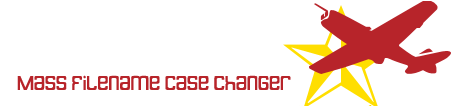
<style>
.page{position:relative;width:453px;height:106px;background:#ffffff}
.page>*{position:absolute;margin:0}
.t1{font:24px "Butterbelly";color:#b7242a}
</style>
<div class="page">
<p class="t1" style="left:17px;top:75px;width:274px;height:15px">Mass Filename Case Changer</p>
</div>
